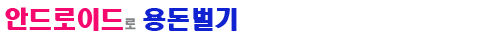
<style>
.page{position:relative;width:489px;height:37px;background:#ffffff}
.page>*{position:absolute;margin:0}
.t1{font:24px "HeadlineR-HM";color:#f5096f}
.t2{font:12px "HeadlineR-HM";color:#818385}
.t3{font:24px "HeadlineR-HM";color:#1123d0}
</style>
<div class="page">
<p class="t1" style="left:5px;top:7px;width:232px;height:24px">안드로이드<span class="t2">로 </span><span class="t3">용돈벌기</span></p>
</div>
